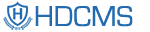
<style>
.page{position:relative;width:150px;height:32px;background:#ffffff}
.page>*{position:absolute;margin:0}
.t1{font:29.6px "EurostileRegular";color:#226bb0}
</style>
<div class="page">
<p class="t1" style="left:35px;top:6px;width:98px;height:21px">HDCMS</p>
</div>
